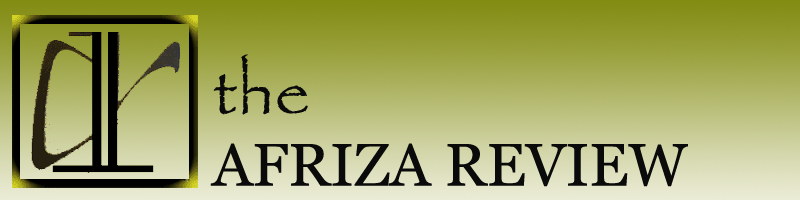
<style>
.page{position:relative;width:800px;height:200px}
.page>*{position:absolute;margin:0}
.t1{font:60px "Georgia";color:#0a0a0a}
.t2{font:72px "Papyrus-Regular";color:#0a0a0a}
</style>
<div class="page">
<p class="t1" style="left:210px;top:54px;width:478px;height:133px"><span class="t2">the<br></span>AFRIZA REVIEW</p>
</div>
